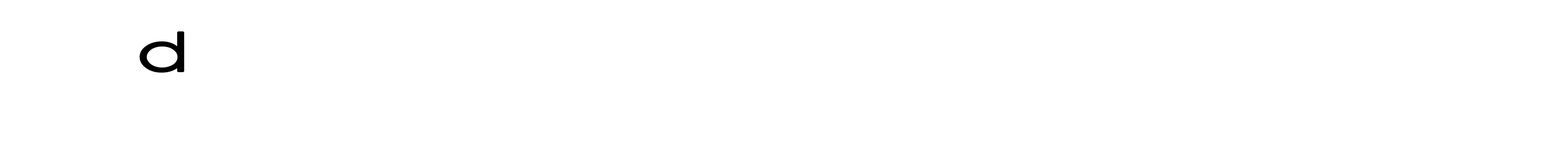
<style>
.page{position:relative;width:1568px;height:152px;background:#ffffff}
.page>*{position:absolute;margin:0}
.t1{font:53.1px "CenturyGothic";letter-spacing:0.06em;color:#000000;font-weight:bold;scale:1.45 1}
</style>
<div class="page">
<p class="t1" style="left:139px;top:31px;width:45px;height:41px">d</p>
</div>
